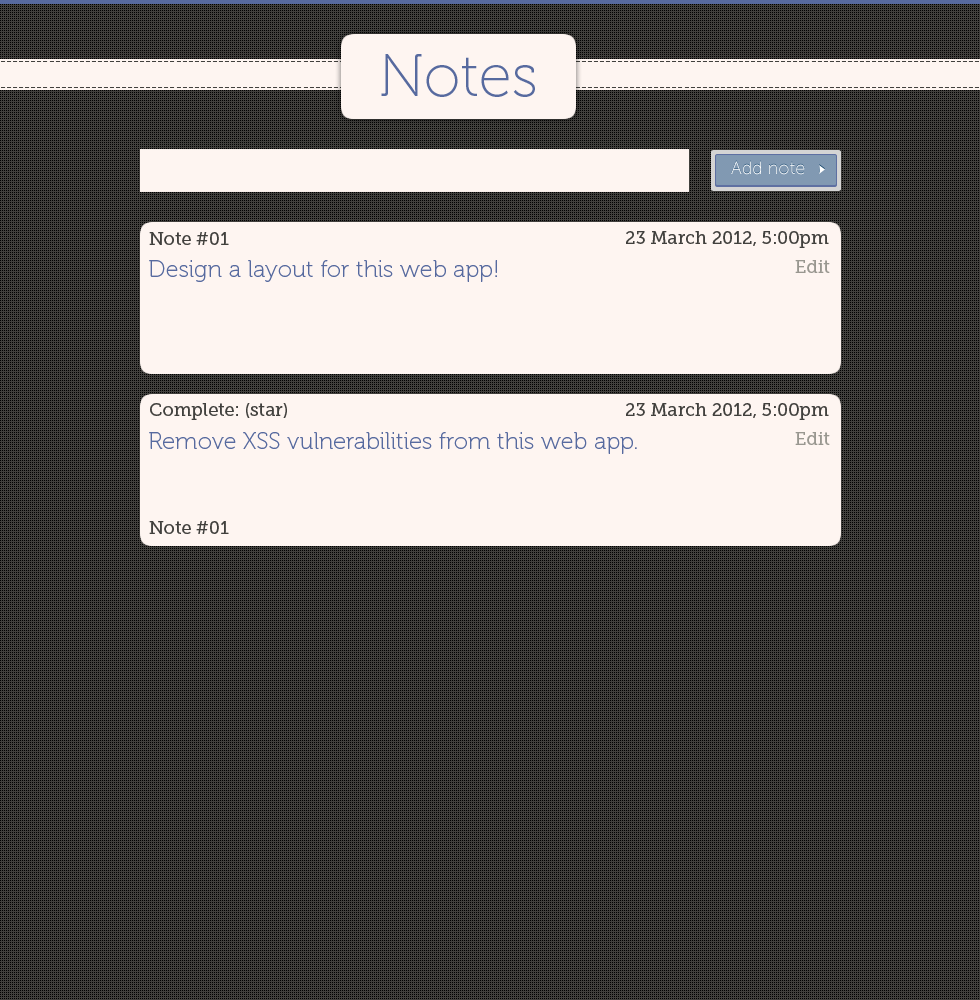
<style>
.page{position:relative;width:980px;height:1000px;background:#41403d}
.page>*{position:absolute;margin:0}
.t1{font:60px "Museo-100";color:#576a9f}
.t2{font:18px "MuseoSans-100";color:#ffffff}
.t3{font:18px "MuseoSlab-500";color:#41403d}
.t4{font:24px "Museo-100";color:#576a9f}
.t5{font:18px "MuseoSlab-500";color:#999790}
</style>
<div class="page">
<p class="t1" style="left:381px;top:54px;width:154px;height:43px">Notes</p>
<p class="t2" style="left:731px;top:161px;width:74px;height:14px">Add note</p>
<p class="t3" style="left:149px;top:232px;width:80px;height:13px">Note #01</p>
<p class="t3" style="left:626px;top:231px;width:203px;height:17px">23 March 2012, 5:00pm</p>
<p class="t4" style="left:149px;top:260px;width:348px;height:22px">Design a layout for this web app!</p>
<p class="t5" style="left:795px;top:260px;width:35px;height:13px">Edit</p>
<p class="t3" style="left:150px;top:403px;width:137px;height:17px">Complete: (star)</p>
<p class="t3" style="left:626px;top:403px;width:203px;height:17px">23 March 2012, 5:00pm</p>
<p class="t4" style="left:149px;top:432px;width:488px;height:22px">Remove XSS vulnerabilities from this web app.</p>
<p class="t5" style="left:795px;top:432px;width:35px;height:13px">Edit</p>
<p class="t3" style="left:149px;top:521px;width:80px;height:13px">Note #01</p>
</div>
